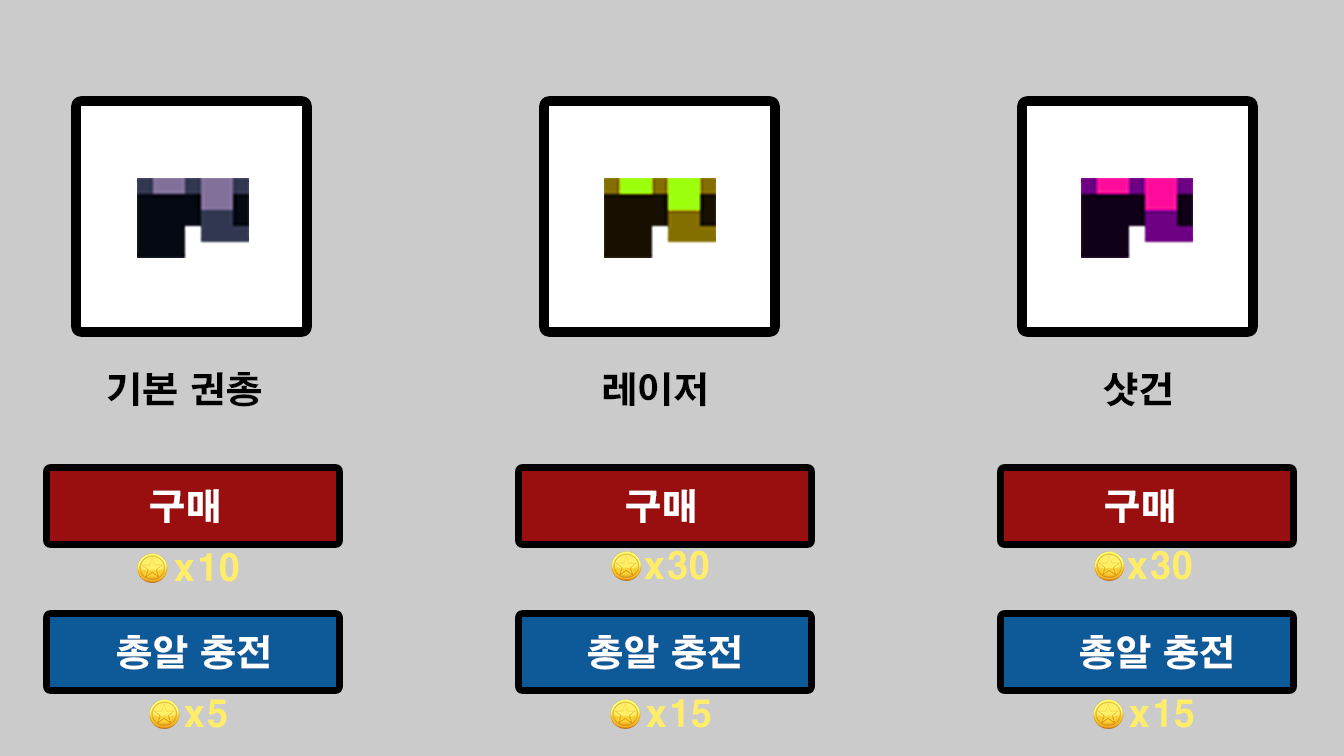
<style>
.page{position:relative;width:1344px;height:756px;background:#cbcbcb}
.page>*{position:absolute;margin:0}
.t1{font:36px "H2gtrE";color:#000000}
.t2{font:36px "H2gtrE";color:#ffffff}
.t3{font:36px "H2gtrE";color:#ffed67}
</style>
<div class="page">
<p class="t1" style="left:107px;top:372px;width:154px;height:35px">기본 권총</p>
<p class="t1" style="left:603px;top:372px;width:103px;height:35px">레이저</p>
<p class="t1" style="left:1103px;top:372px;width:68px;height:35px">샷건</p>
<p class="t2" style="left:150px;top:489px;width:69px;height:34px">구매</p>
<p class="t2" style="left:626px;top:489px;width:69px;height:34px">구매</p>
<p class="t2" style="left:1105px;top:489px;width:69px;height:34px">구매</p>
<p class="t3" style="left:174px;top:552px;width:65px;height:30px">x10</p>
<p class="t3" style="left:644px;top:550px;width:65px;height:30px">x30</p>
<p class="t3" style="left:1127px;top:550px;width:65px;height:30px">x30</p>
<p class="t2" style="left:117px;top:635px;width:152px;height:35px">총알 충전</p>
<p class="t2" style="left:588px;top:635px;width:152px;height:35px">총알 충전</p>
<p class="t2" style="left:1080px;top:635px;width:152px;height:35px">총알 충전</p>
<p class="t3" style="left:184px;top:699px;width:43px;height:29px">x5</p>
<p class="t3" style="left:646px;top:699px;width:65px;height:29px">x15</p>
<p class="t3" style="left:1129px;top:699px;width:65px;height:29px">x15</p>
</div>
